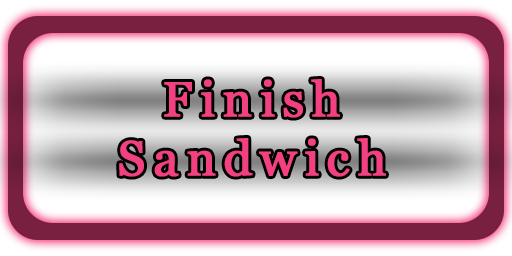
<style>
.page{position:relative;width:512px;height:256px}
.page>*{position:absolute;margin:0}
.t1{font:48.9px "Georgia";letter-spacing:0.14em;color:#f24180;font-weight:bold}
</style>
<div class="page">
<p class="t1" style="left:119px;top:79px;width:267px;height:98px;text-align:center">Finish<br>Sandwich</p>
</div>
